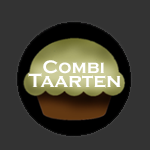
<style>
.page{position:relative;width:150px;height:150px;background:#333333}
.page>*{position:absolute;margin:0}
.t1{font:18.7px "CopperplateGothic-Bold";color:#ffffff}
.t2{font:20px "CopperplateGothic-Bold";color:#ffffff}
</style>
<div class="page">
<p class="t1" style="left:43px;top:60px;width:61px;height:14px">Combi</p>
<p class="t2" style="left:28px;top:73px;width:93px;height:15px">Taarten</p>
</div>
